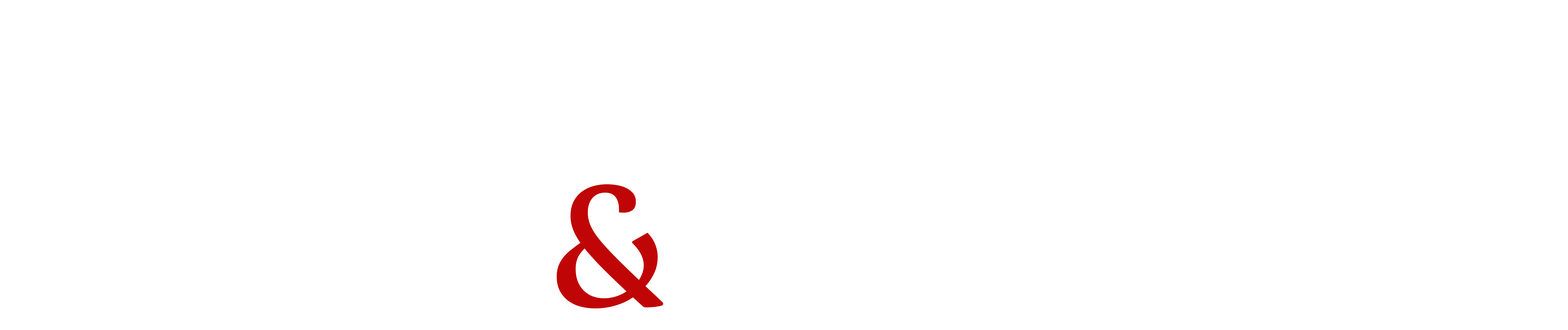
<style>
.page{position:relative;width:1568px;height:330px;background:#ffffff}
.page>*{position:absolute;margin:0}
.t1{font:209.3px "Nyala-Regular";color:#bf0505;scale:0.96 1}
</style>
<div class="page">
<p class="t1" style="left:557px;top:184px;width:106px;height:124px">&amp;</p>
</div>
